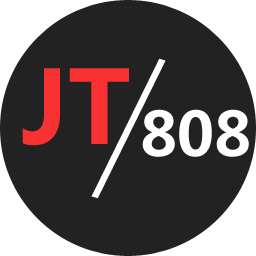
<style>
.page{position:relative;width:256px;height:256px;background:#222222}
.page>*{position:absolute;margin:0}
.t1{font:171.2px "MicrosoftYaHei";color:#ffffff;scale:0.41 1}
.t2{font:100px "MicrosoftYaHei-Bold";color:#f83232}
.t3{font:60px "MicrosoftYaHei-Bold";color:#ffffff}
</style>
<div class="page">
<p class="t1" style="left:91px;top:58px;width:75px;height:141px;rotate:17deg">/</p>
<p class="t2" style="left:22px;top:68px;width:107px;height:78px">JT</p>
<p class="t3" style="left:142px;top:109px;width:107px;height:48px">808</p>
</div>
